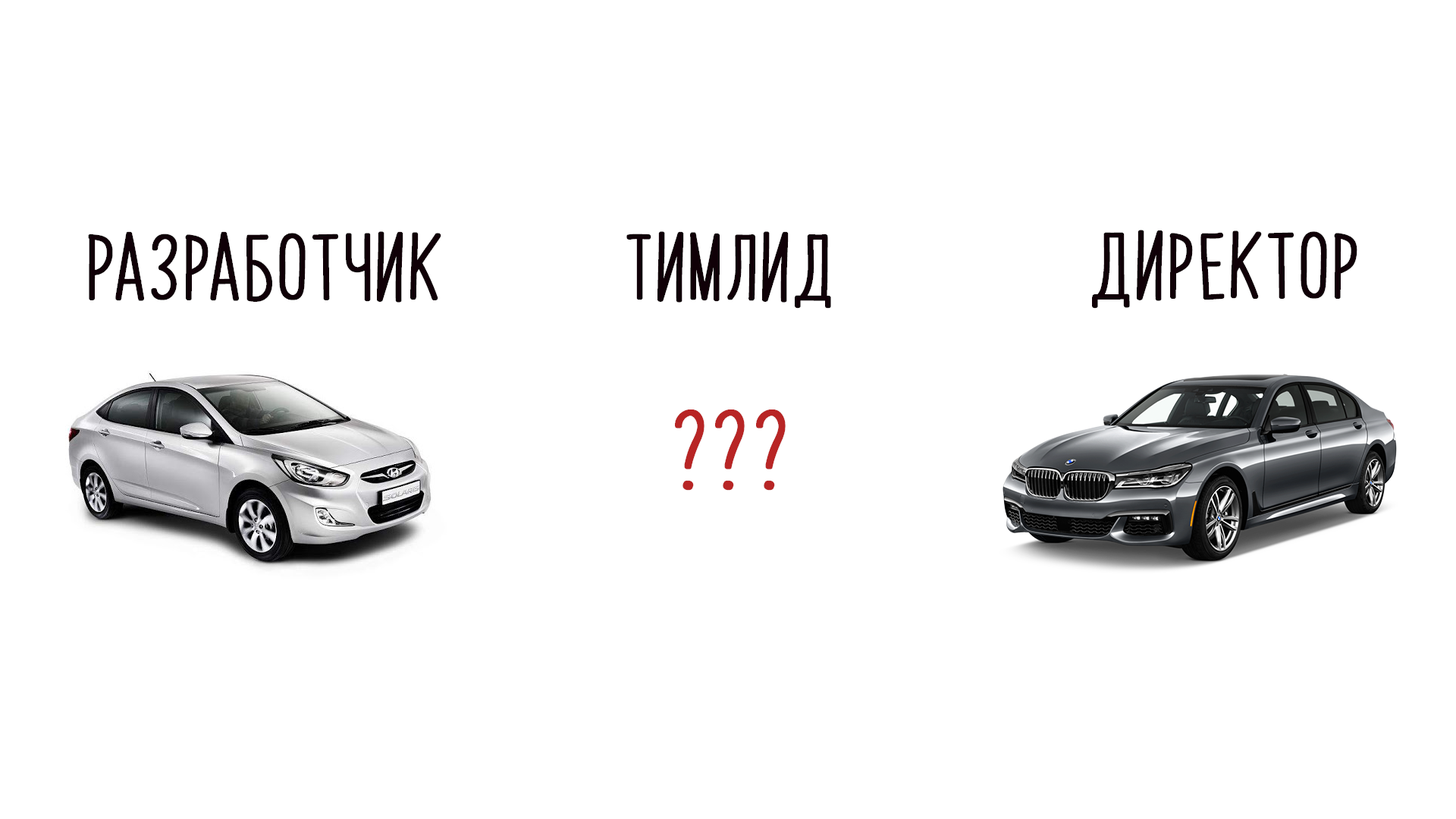
<style>
.page{position:relative;width:1456px;height:819px;background:#ffffff}
.page>*{position:absolute;margin:0}
.t1{font:56.7px "PapayaSunrise";color:#100007;font-weight:bold}
.t2{font:68.2px "PapayaSunrise";color:#b82525;font-weight:bold}
</style>
<div class="page">
<p class="t1" style="left:88px;top:231px;width:353px;height:72px">Разработчик</p>
<p class="t1" style="left:626px;top:231px;width:205px;height:78px">Тимлид</p>
<p class="t1" style="left:1092px;top:230px;width:265px;height:79px">Директор</p>
<p class="t2" style="left:675px;top:409px;width:111px;height:82px">???</p>
</div>
